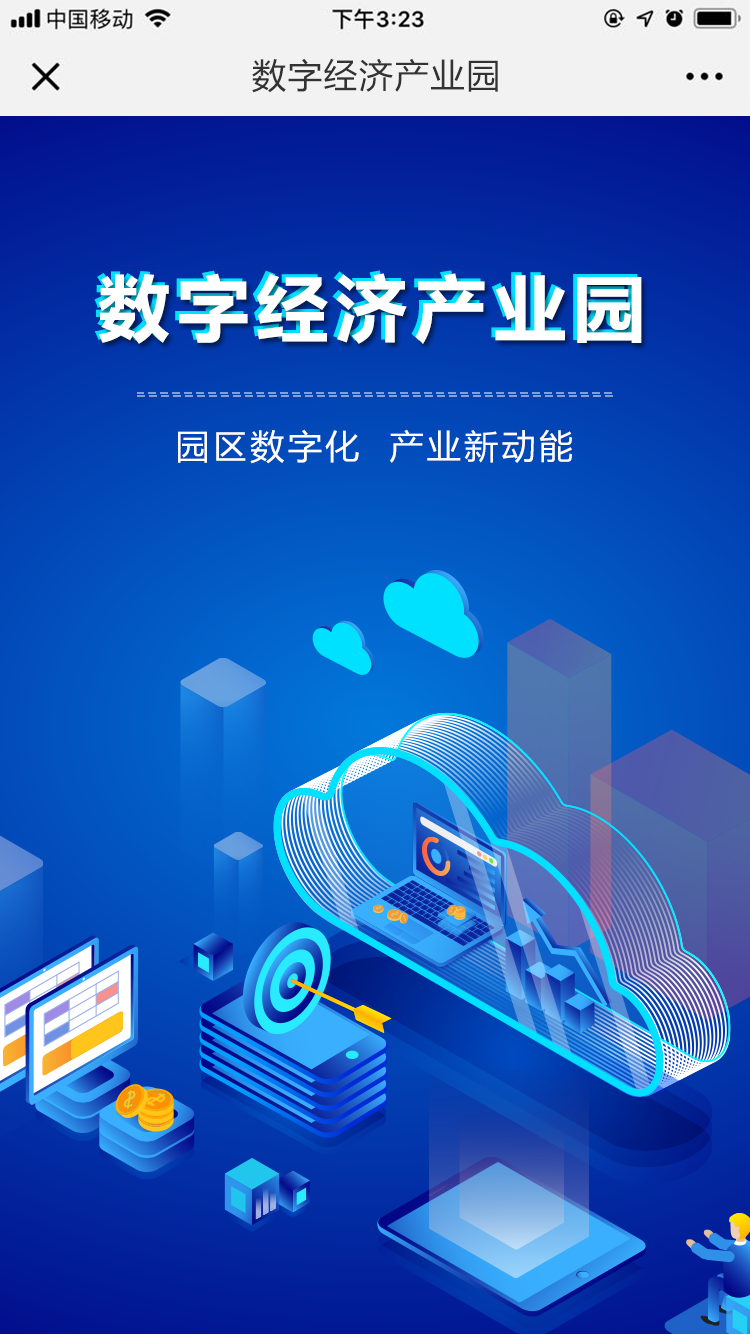
<style>
.page{position:relative;width:750px;height:1334px}
.page>*{position:absolute;margin:0}
.t1{font:34px "MicrosoftYaHei";letter-spacing:0.05em;color:#333333}
.t2{font:72px "MicrosoftYaHei-Bold";letter-spacing:0.1em;color:#ffffff}
.t3{font:34px "MicrosoftYaHei";letter-spacing:0.1em;color:#ffffff}
</style>
<div class="page">
<p class="t1" style="left:252px;top:58px;width:246px;height:35px">数字经济产业园</p>
<p class="t2" style="left:94px;top:270px;width:544px;height:71px">数字经济产业园</p>
<p class="t2" style="left:98px;top:273px;width:544px;height:71px">数字经济产业园</p>
<p class="t3" style="left:178px;top:429px;width:394px;height:35px">园区数字化  产业新动能</p>
</div>
